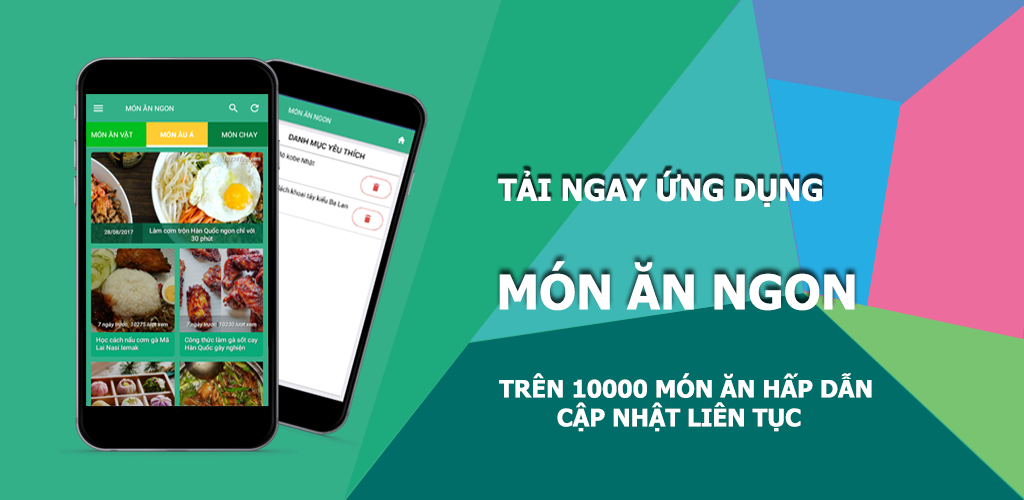
<style>
.page{position:relative;width:1024px;height:500px}
.page>*{position:absolute;margin:0}
.t1{font:30px "Tahoma-Bold";color:#ffffff}
.t2{font:48px "Tahoma-Bold";color:#ffffff}
.t3{font:24px "Tahoma-Bold";color:#ffffff}
</style>
<div class="page">
<p class="t1" style="left:498px;top:170px;width:324px;height:37px">TẢI NGAY ỨNG DỤNG</p>
<p class="t2" style="left:499px;top:261px;width:356px;height:50px">MÓN ĂN NGON</p>
<p class="t3" style="left:499px;top:373px;width:373px;height:59px"><span class="t2"> </span>TRÊN 10000 MÓN ĂN HẤP DẪN CẬP NHẬT LIÊN TỤC</p>
</div>
